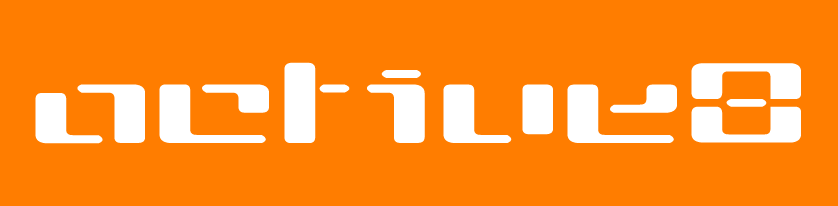
<style>
.page{position:relative;width:838px;height:206px;background:#ff7d00}
.page>*{position:absolute;margin:0}
.t1{font:109.1px "CYBE";color:#ffffff;scale:1.46 1}
</style>
<div class="page">
<p class="t1" style="left:35px;top:62px;width:766px;height:82px">active8</p>
</div>
